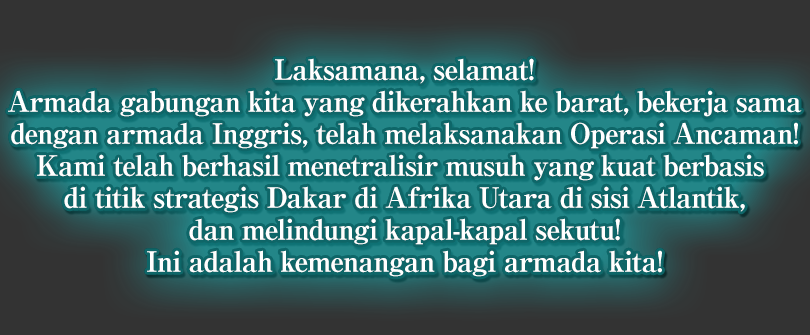
<style>
.page{position:relative;width:810px;height:335px;background:#333333}
.page>*{position:absolute;margin:0}
.t1{font:28px/32px "RyuminPro-ExBold";letter-spacing:-0.04em;color:#ffffff}
</style>
<div class="page">
<p class="t1" style="left:8px;top:58px;width:794px;height:219px;text-align:center">Laksamana, selamat!<br>Armada gabungan kita yang dikerahkan ke barat, bekerja sama<br>dengan armada Inggris, telah melaksanakan Operasi Ancaman!<br>Kami telah berhasil menetralisir musuh yang kuat berbasis <br>di titik strategis Dakar di Afrika Utara di sisi Atlantik,<br>dan melindungi kapal-kapal sekutu!<br>Ini adalah kemenangan bagi armada kita!</p>
</div>
